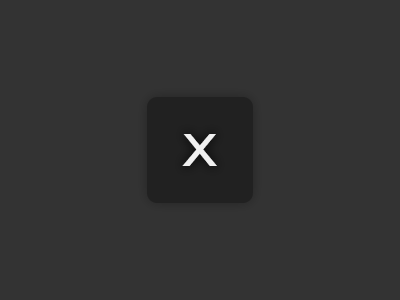
<style>
.page{position:relative;width:400px;height:300px;background:#333333}
.page>*{position:absolute;margin:0}
.t1{font:50px "Consolas";color:#f0f0f0;scale:1.3 1}
</style>
<div class="page">
<p class="t1" style="left:182px;top:134px;width:35px;height:32px">X</p>
</div>
